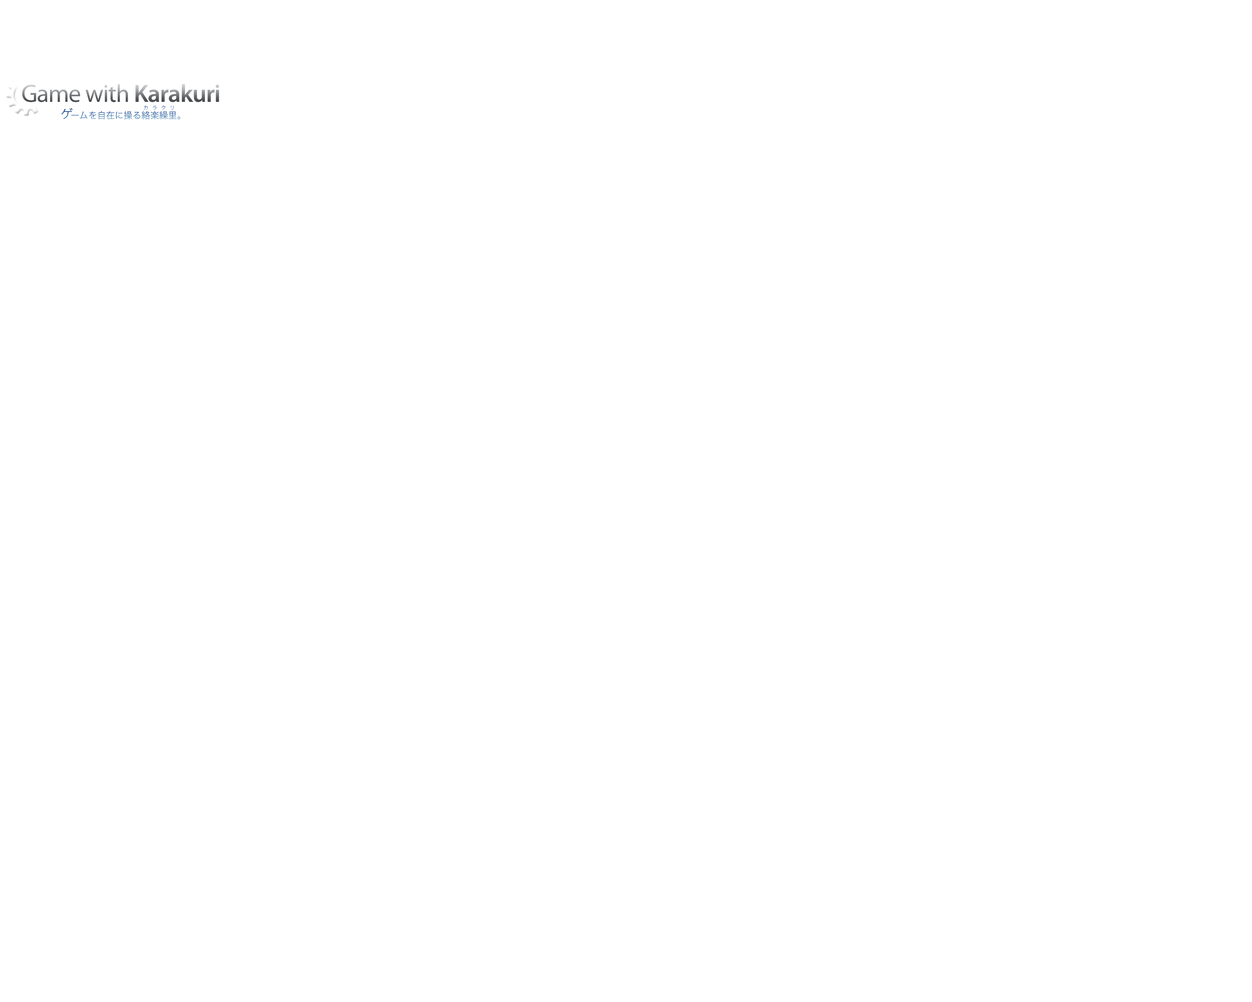
<style>
.page{position:relative;width:1252px;height:1002px;background:#ffffff}
.page>*{position:absolute;margin:0}
.t1{font:25px "MyriadPro-Regular";letter-spacing:-0.025em}
.t2{font:25px "MyriadPro-Semibold";letter-spacing:-0.025em}
.t3{font:9px "HiraKakuPro-W3"}
.t4{font:12.5px "HiraKakuPro-W3";letter-spacing:-0.1em}
.t5{font:9px "HiraKakuPro-W3";letter-spacing:0.05em}
.t6{font:5.1px "HiraKakuProN-W3";letter-spacing:0.75em}
</style>
<div class="page">
<p class="t1" style="left:22px;top:84px;width:197px;height:18px">Game with <span class="t2">Karakuri</span></p>
<p class="t3" style="left:61px;top:108px;width:119px;height:11px"><span class="t4">ゲ</span><span class="t5">ーム</span>を自在に操る絡楽繰里。</p>
<p class="t6" style="left:144px;top:105px;width:30px;height:5px">カラクリ</p>
</div>
